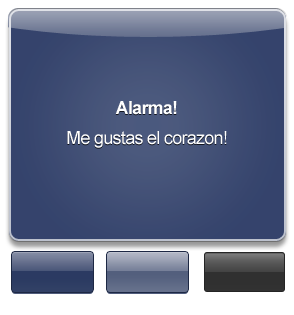
<style>
.page{position:relative;width:294px;height:315px}
.page>*{position:absolute;margin:0}
.t1{font:18px/30.1px "ArialMT";letter-spacing:-0.04em;color:#ffffff}
.t2{font:18px/30.1px "Arial-BoldMT";letter-spacing:-0.04em;color:#ffffff}
</style>
<div class="page">
<p class="t1" style="left:67px;top:101px;width:160px;height:47px;text-align:center"><span class="t2">Alarma!<br></span>Me gustas el corazon!</p>
</div>
